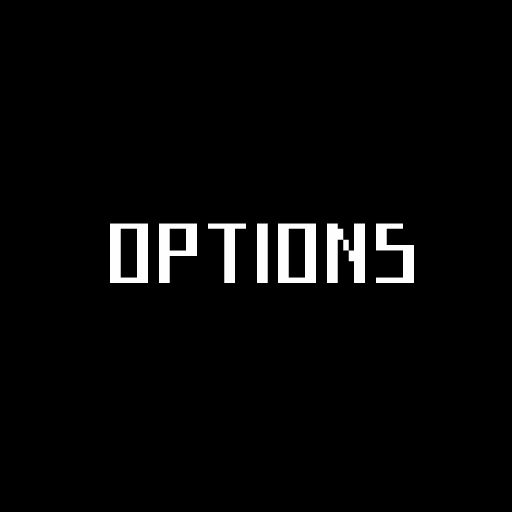
<style>
.page{position:relative;width:512px;height:512px;background:#000000}
.page>*{position:absolute;margin:0}
.t1{font:79.2px "Starcadia";color:#fffefe}
</style>
<div class="page">
<p class="t1" style="left:110px;top:223px;width:304px;height:60px">OPTIONS</p>
</div>
